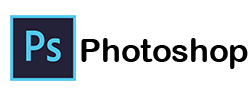
<style>
.page{position:relative;width:250px;height:100px;background:#ffffff}
.page>*{position:absolute;margin:0}
.t1{font:33.5px "ArialRoundedMTBold";color:#000000}
</style>
<div class="page">
<p class="t1" style="left:81px;top:38px;width:167px;height:31px">Photoshop</p>
</div>
